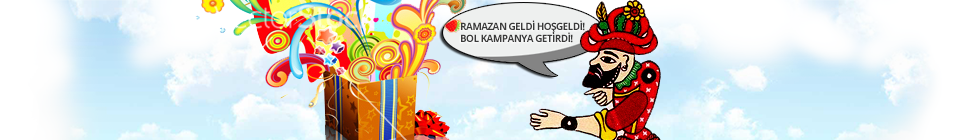
<style>
.page{position:relative;width:953px;height:140px}
.page>*{position:absolute;margin:0}
.t1{font:10px "OpenSans-Bold";letter-spacing:-0.06em;color:#3a3a3a}
</style>
<div class="page">
<p class="t1" style="left:461px;top:20px;width:124px;height:23px">RAMAZAN GELDİ HOŞGELDİ!<br>BOL KAMPANYA GETİRDİ!</p>
</div>
